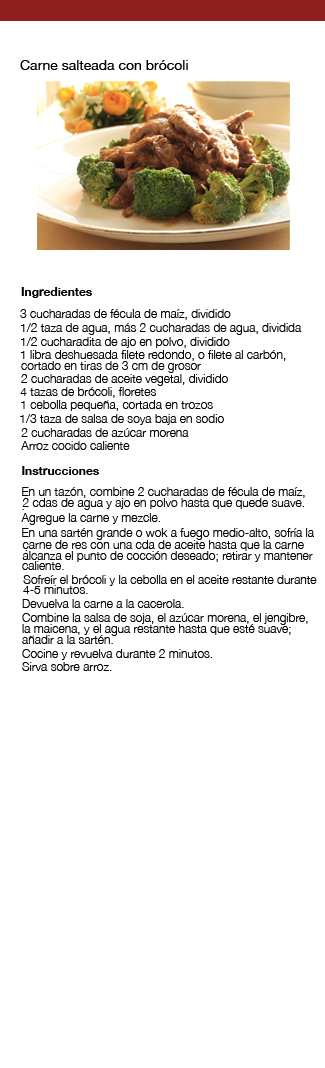
<style>
.page{position:relative;width:325px;height:1068px;background:#ffffff}
.page>*{position:absolute;margin:0}
.t1{font:14px "HelveticaNeue";color:#000000}
.t2{font:12px "HelveticaNeue-Bold";color:#000000}
.t3{font:12px "HelveticaNeue-Light";color:#000000}
</style>
<div class="page">
<p class="t1" style="left:20px;top:60px;width:168px;height:10px">Carne salteada con brócoli</p>
<p class="t2" style="left:21px;top:287px;width:71px;height:11px">Ingredientes</p>
<p class="t3" style="left:20px;top:309px;width:211px;height:11px">3 cucharadas de fécula de maíz, dividido</p>
<p class="t3" style="left:21px;top:323px;width:281px;height:12px">1/2 taza de agua, más 2 cucharadas de agua, dividida</p>
<p class="t3" style="left:21px;top:337px;width:209px;height:11px">1/2 cucharadita de ajo en polvo, dividido</p>
<p class="t3" style="left:21px;top:350px;width:265px;height:11px">1 libra deshuesada filete redondo, o filete al carbón,</p>
<p class="t3" style="left:21px;top:361px;width:180px;height:12px">cortado en tiras de 3 cm de grosor</p>
<p class="t3" style="left:21px;top:374px;width:207px;height:12px">2 cucharadas de aceite vegetal, dividido</p>
<p class="t3" style="left:20px;top:387px;width:136px;height:11px">4 tazas de brócoli, floretes</p>
<p class="t3" style="left:21px;top:400px;width:192px;height:11px">1 cebolla pequeña, cortada en trozos</p>
<p class="t3" style="left:20px;top:414px;width:204px;height:11px">1/3 taza de salsa de soya baja en sodio</p>
<p class="t3" style="left:21px;top:428px;width:168px;height:9px">2 cucharadas de azúcar morena</p>
<p class="t3" style="left:21px;top:441px;width:109px;height:9px">Arroz cocido caliente</p>
<p class="t2" style="left:22px;top:466px;width:77px;height:9px">Instrucciones</p>
<p class="t3" style="left:22px;top:487px;width:283px;height:23px">En un tazón, combine 2 cucharadas de fécula de maíz,<br>.</p>
<p class="t3" style="left:22px;top:498px;width:282px;height:12px">2 cdas de agua y ajo en polvo hasta que quede suave.</p>
<p class="t3" style="left:21px;top:513px;width:139px;height:12px">Agregue la carne y mezcle.</p>
<p class="t3" style="left:22px;top:528px;width:292px;height:23px">En una sartén grande o wok a fuego medio-alto, sofría la <br> .</p>
<p class="t3" style="left:22px;top:540px;width:282px;height:11px">carne de res con una cda de aceite hasta que la carne</p>
<p class="t3" style="left:22px;top:551px;width:291px;height:11px">alcanza el punto de cocción deseado; retirar y mantener</p>
<p class="t3" style="left:22px;top:561px;width:42px;height:9px">caliente.</p>
<p class="t3" style="left:23px;top:575px;width:294px;height:11px">Sofreír el brócoli y la cebolla en el aceite restante durante</p>
<p class="t3" style="left:23px;top:585px;width:65px;height:9px">4-5 minutos.</p>
<p class="t3" style="left:22px;top:599px;width:162px;height:9px">Devuelva la carne a la cacerola.</p>
<p class="t3" style="left:22px;top:613px;width:286px;height:12px">Combine la salsa de soja, el azúcar morena, el jengibre,</p>
<p class="t3" style="left:22px;top:624px;width:269px;height:12px">la maicena, y el agua restante hasta que esté suave;</p>
<p class="t3" style="left:22px;top:635px;width:91px;height:9px">añadir a la sartén.</p>
<p class="t3" style="left:22px;top:649px;width:190px;height:11px">Cocine y revuelva durante 2 minutos.</p>
<p class="t3" style="left:22px;top:662px;width:90px;height:9px">Sirva sobre arroz.</p>
</div>
